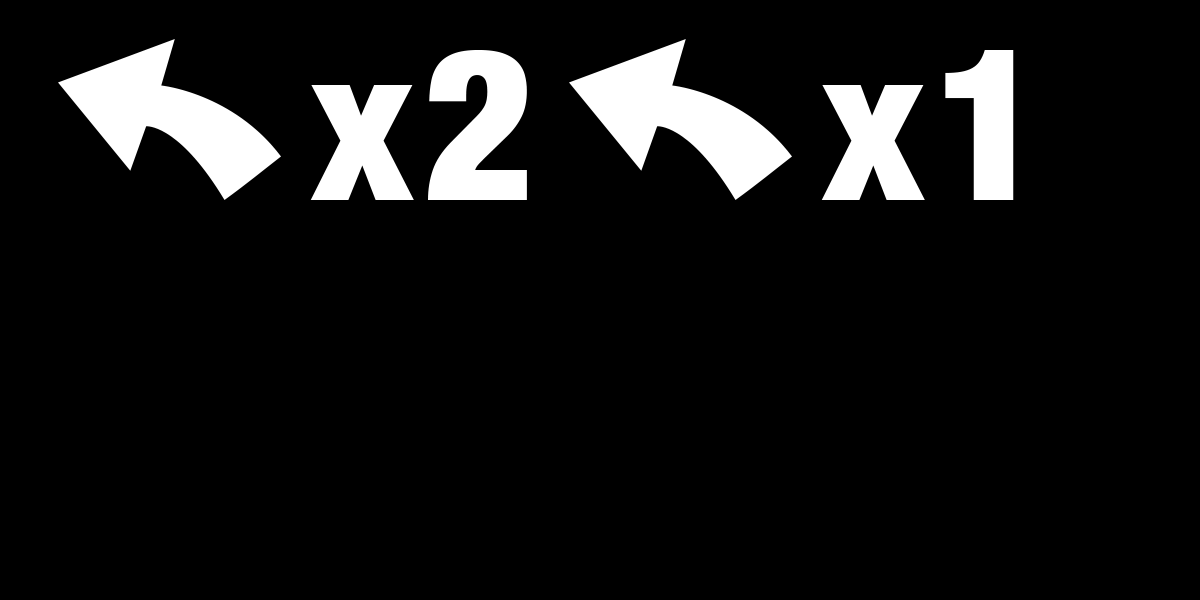
<style>
.page{position:relative;width:1200px;height:600px;background:#000000}
.page>*{position:absolute;margin:0}
.t1{font:211.9px "HelveticaNeue-CondensedBlack";letter-spacing:0.05em;color:#ffffff}
</style>
<div class="page">
<p class="t1" style="left:310px;top:50px;width:217px;height:150px">x2</p>
<p class="t1" style="left:821px;top:50px;width:193px;height:150px">x1</p>
</div>
